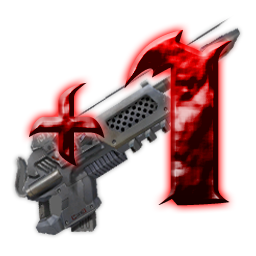
<style>
.page{position:relative;width:256px;height:256px;background:#ffffff}
.page>*{position:absolute;margin:0}
.t1{font:223.3px "UnrealTournament";scale:0.89 1}
</style>
<div class="page">
<p class="t1" style="left:29px;top:29px;width:204px;height:177px">+1</p>
</div>
